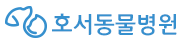
<style>
.page{position:relative;width:180px;height:50px;background:#ffffff}
.page>*{position:absolute;margin:0}
.t1{font:23.5px "12LotteMartDreamBold";color:#3690ce}
</style>
<div class="page">
<p class="t1" style="left:52px;top:13px;width:125px;height:23px">호서동물병원</p>
</div>
